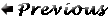
<style>
.page{position:relative;width:110px;height:20px;background:#ffffff}
.page>*{position:absolute;margin:0}
.t1{font:16.7px "LucidaHandwriting-Italic";color:#000000;font-weight:bold}
</style>
<div class="page">
<p class="t1" style="left:18px;top:3px;width:90px;height:13px">Previous</p>
</div>
